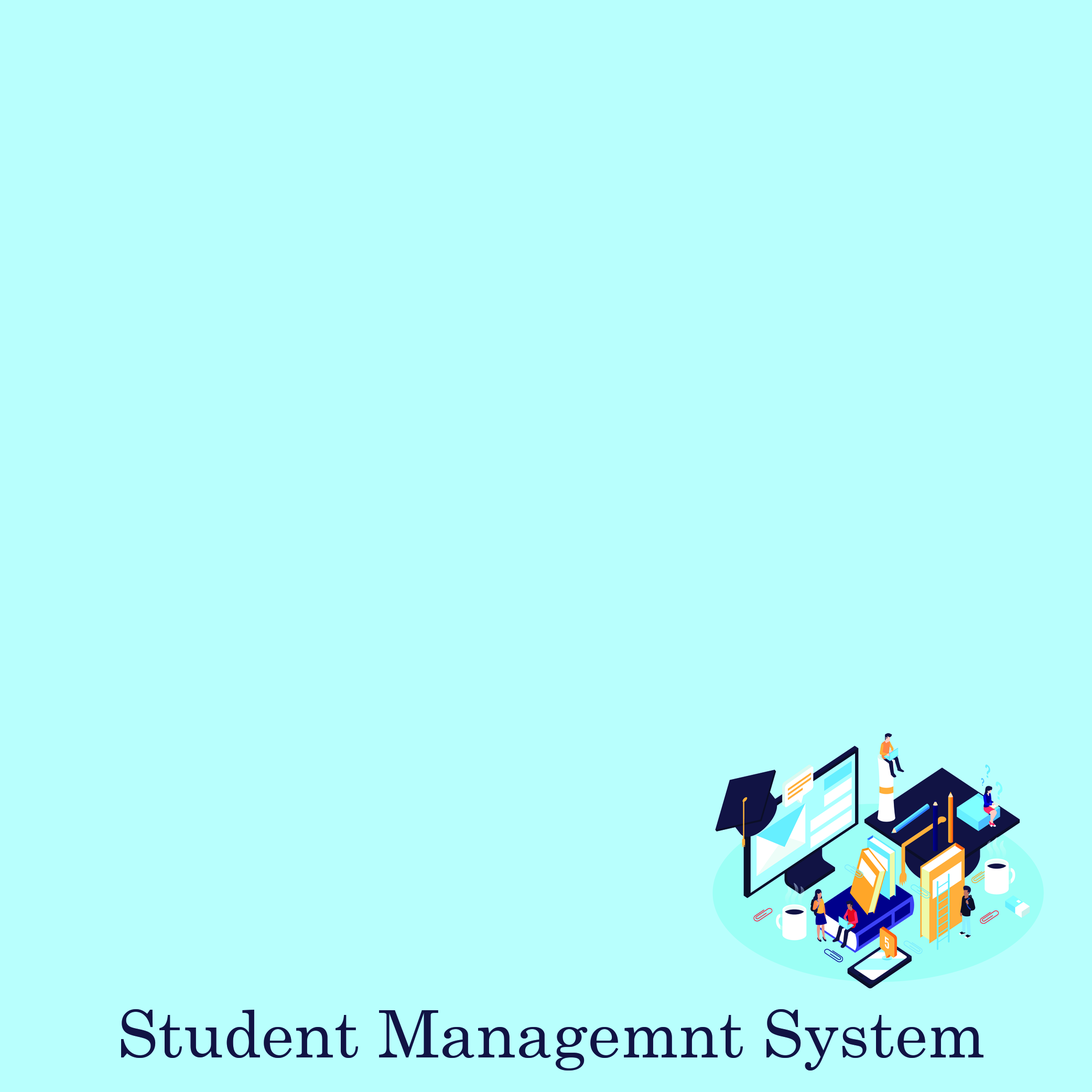
<style>
.page{position:relative;width:1092px;height:1092px;background:#b8fffd}
.page>*{position:absolute;margin:0}
.t1{font:65.5px "Century";color:#111344}
</style>
<div class="page">
<p class="t1" style="left:121px;top:1009px;width:862px;height:61px">Student Managemnt System</p>
</div>
